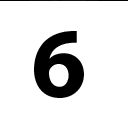
<style>
.page{position:relative;width:128px;height:128px;background:#ffffff}
.page>*{position:absolute;margin:0}
.t1{font:100px "MyriadHebrew-Bold";color:#000000}
</style>
<div class="page">
<p class="t1" style="left:34px;top:30px;width:50px;height:67px">6</p>
</div>
